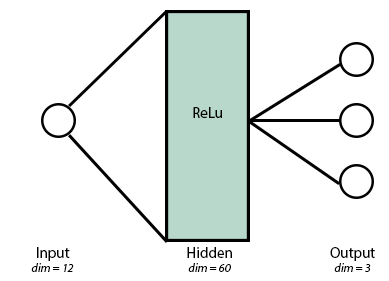
<style>
.page{position:relative;width:389px;height:281px;background:#ffffff}
.page>*{position:absolute;margin:0}
.t1{font:15px "MyriadPro-Regular";color:#000000}
.t2{font:12px "MyriadPro-It";color:#000000}
</style>
<div class="page">
<p class="t1" style="left:193px;top:107px;width:29px;height:11px">ReLu</p>
<p class="t2" style="left:31px;top:247px;width:43px;height:25px;text-align:center"><span class="t1">Input<br></span>dim = 12</p>
<p class="t2" style="left:187px;top:247px;width:45px;height:25px;text-align:center"><span class="t1">Hidden<br></span>dim = 60</p>
<p class="t2" style="left:330px;top:247px;width:45px;height:25px;text-align:center"><span class="t1">Output<br></span>dim = 3</p>
</div>
